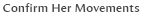
<style>
.page{position:relative;width:142px;height:16px;background:#ffffff}
.page>*{position:absolute;margin:0}
.t1{font:12px "AmiraParadiso";letter-spacing:0.025em;color:#474747}
</style>
<div class="page">
<p class="t1" style="left:3px;top:3px;width:137px;height:9px">Confirm Her Movements</p>
</div>
